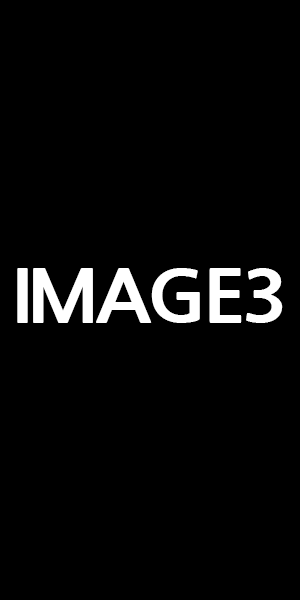
<style>
.page{position:relative;width:300px;height:600px;background:#000000}
.page>*{position:absolute;margin:0}
.t1{font:75px "NanumGothicExtraBold";letter-spacing:-0.05em;color:#ffffff;text-transform:uppercase}
</style>
<div class="page">
<p class="t1" style="left:17px;top:268px;width:266px;height:55px">IMAGE3</p>
</div>
